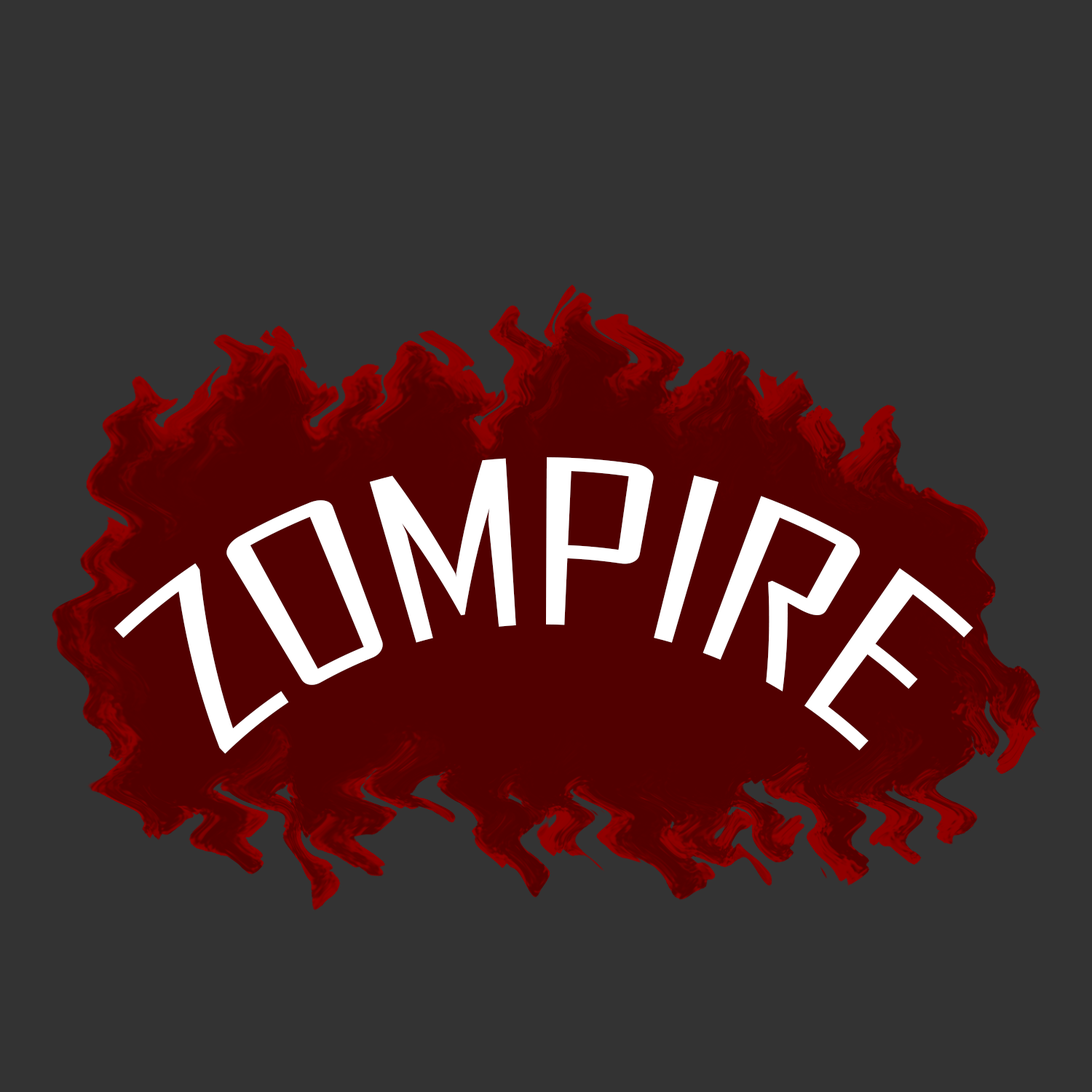
<style>
.page{position:relative;width:1092px;height:1092px;background:#333333}
.page>*{position:absolute;margin:0}
.t1{font:218.4px "AgencyFB-Reg";color:#ffffff}
</style>
<div class="page">
<p class="t1" style="left:114px;top:457px;width:859px;height:297px">ZOMPIRE</p>
</div>
